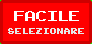
<style>
.page{position:relative;width:92px;height:44px;background:#ff0000}
.page>*{position:absolute;margin:0}
.t1{font:20px "ArcadeClassic";color:#ffffff}
.t2{font:12.4px "ArcadeClassic";color:#e6e6e6;scale:0.97 1}
</style>
<div class="page">
<p class="t1" style="left:14px;top:11px;width:65px;height:10px">FACILE</p>
<p class="t2" style="left:8px;top:28px;width:76px;height:6px">selezionare</p>
</div>
